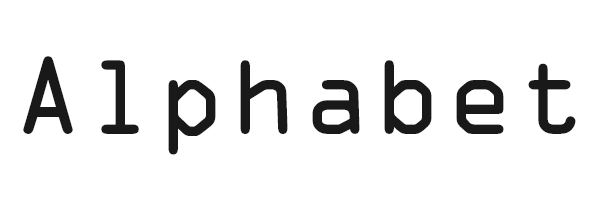
<style>
.page{position:relative;width:600px;height:220px;background:#ffffff}
.page>*{position:absolute;margin:0}
.t1{font:100px "OCRAStd";color:#191919}
</style>
<div class="page">
<p class="t1" style="left:23px;top:56px;width:553px;height:99px">Alphabet</p>
</div>
